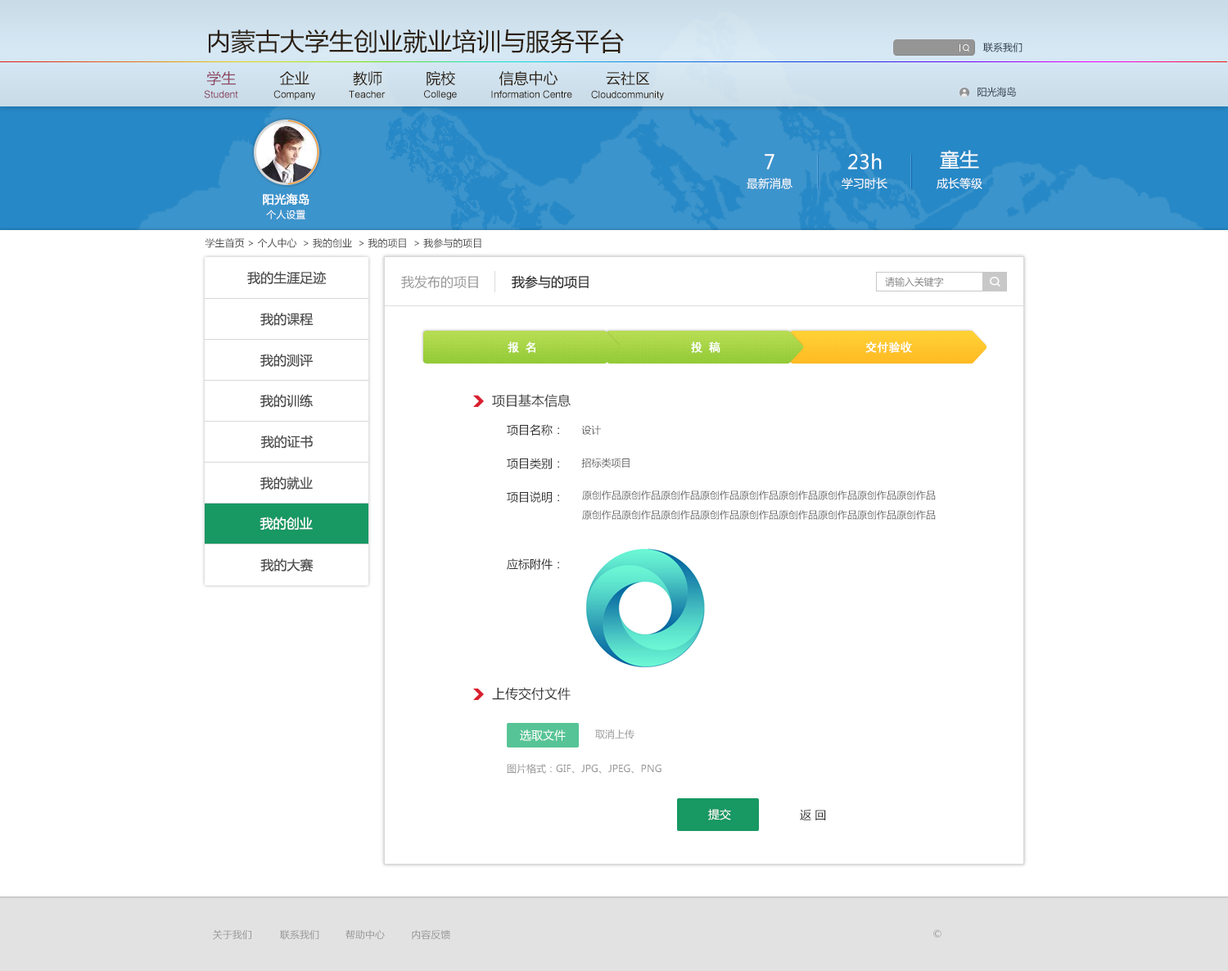
<style>
.page{position:relative;width:1228px;height:971px;background:#ffffff}
.page>*{position:absolute;margin:0}
.t1{font:24.6px "MicrosoftYaHei";color:#2b1f11}
.t2{font:9.8px "MicrosoftYaHei";color:#263744}
.t3{font:14.7px "MicrosoftYaHei";color:#2b1f11}
.t4{font:14.7px "MicrosoftYaHei";color:#8c4360}
.t5{font:9.8px "ArialMT";color:#8c4360}
.t6{font:9.8px "ArialMT";color:#2b1f11}
.t7{font:19.6px "MicrosoftYaHei";color:#ffffff}
.t8{font:11.5px "MicrosoftYaHei";color:#ffffff}
.t9{font:11.5px/19.6px "MicrosoftYaHei";color:#ffffff;font-weight:bold}
.t10{font:9.8px/14.7px "MicrosoftYaHei";color:#ffffff}
.t11{font:9.8px "MicrosoftYaHei";color:#4c4c4c}
.t12{font:13.1px "MicrosoftYaHei";color:#4c4c4c}
.t13{font:13.1px "MicrosoftYaHei";color:#999999}
.t14{font:13.1px "MicrosoftYaHei";color:#333333}
.t15{font:9.8px "MicrosoftYaHei";color:#828282}
.t16{font:11.5px "SimHei";color:#ffffff;font-weight:bold}
.t17{font:13.1px "MicrosoftYaHei";color:#323232}
.t18{font:11.5px/33.6px "MicrosoftYaHei";color:#323232}
.t19{font:9.8px "MicrosoftYaHei";color:#646464}
.t20{font:9.8px/19.6px "MicrosoftYaHei";color:#646464}
.t21{font:13.1px "MicrosoftYaHei";color:#ffffff}
.t22{font:9.8px "MicrosoftYaHei";color:#969696}
.t23{font:11.5px "MicrosoftYaHei";color:#323232}
.t24{font:9.6px "MicrosoftYaHei";color:#969696}
</style>
<div class="page">
<p class="t1" style="left:209px;top:29px;width:415px;height:25px">内蒙古大学生创业就业培训与服务平台</p>
<p class="t2" style="left:983px;top:43px;width:40px;height:9px">联系我们</p>
<p class="t3" style="left:206px;top:70px;width:443px;height:16px"><span class="t4">学生</span>          企业          教师          院校          信息中心           云社区</p>
<p class="t2" style="left:978px;top:87px;width:38px;height:10px">阳光海岛</p>
<p class="t5" style="left:204px;top:90px;width:34px;height:8px">Student</p>
<p class="t6" style="left:273px;top:90px;width:42px;height:10px">Company</p>
<p class="t6" style="left:349px;top:90px;width:37px;height:8px">Teacher</p>
<p class="t6" style="left:424px;top:90px;width:33px;height:10px">College</p>
<p class="t6" style="left:491px;top:90px;width:81px;height:8px">Information Centre</p>
<p class="t6" style="left:591px;top:90px;width:73px;height:11px">Cloudcommunity</p>
<p class="t7" style="left:940px;top:150px;width:39px;height:19px">童生</p>
<p class="t7" style="left:765px;top:154px;width:9px;height:15px">7</p>
<p class="t7" style="left:848px;top:153px;width:34px;height:16px">23h</p>
<p class="t8" style="left:747px;top:178px;width:46px;height:11px">最新消息</p>
<p class="t8" style="left:842px;top:178px;width:45px;height:11px">学习时长</p>
<p class="t8" style="left:937px;top:178px;width:45px;height:11px">成长等级</p>
<p class="t9" style="left:263px;top:193px;width:46px;height:26px;text-align:center">阳光海岛<br><span class="t10">个人设置</span></p>
<p class="t11" style="left:205px;top:238px;width:276px;height:10px">学生首页 &gt; 个人中心  &gt; 我的创业  &gt; 我的项目  &gt; 我参与的项目</p>
<p class="t12" style="left:247px;top:271px;width:80px;height:14px">我的生涯足迹</p>
<p class="t13" style="left:401px;top:275px;width:77px;height:14px">我发布的项目</p>
<p class="t14" style="left:512px;top:275px;width:77px;height:14px">我参与的项目</p>
<p class="t15" style="left:885px;top:277px;width:59px;height:10px">请输入关键字</p>
<p class="t12" style="left:260px;top:313px;width:54px;height:13px">我的课程</p>
<p class="t16" style="left:508px;top:341px;width:27px;height:12px">报 名</p>
<p class="t16" style="left:691px;top:341px;width:29px;height:12px">投 稿</p>
<p class="t16" style="left:865px;top:341px;width:47px;height:12px">交付验收</p>
<p class="t12" style="left:260px;top:354px;width:53px;height:13px">我的测评</p>
<p class="t12" style="left:260px;top:394px;width:53px;height:14px">我的训练</p>
<p class="t17" style="left:492px;top:394px;width:79px;height:14px">项目基本信息</p>
<p class="t18" style="left:507px;top:424px;width:52px;height:146px;text-align:right">项目名称：<br>项目类别：<br>项目说明：<br><br>应标附件：</p>
<p class="t19" style="left:581px;top:425px;width:20px;height:10px">设计</p>
<p class="t12" style="left:260px;top:435px;width:53px;height:14px">我的证书</p>
<p class="t19" style="left:581px;top:458px;width:49px;height:10px">招标类项目</p>
<p class="t12" style="left:260px;top:476px;width:53px;height:14px">我的就业</p>
<p class="t20" style="left:582px;top:490px;width:354px;height:30px">原创作品原创作品原创作品原创作品原创作品原创作品原创作品原创作品原创作品<br>原创作品原创作品原创作品原创作品原创作品原创作品原创作品原创作品原创作品</p>
<p class="t21" style="left:260px;top:517px;width:53px;height:14px">我的创业</p>
<p class="t12" style="left:260px;top:558px;width:54px;height:13px">我的大赛</p>
<p class="t17" style="left:492px;top:687px;width:79px;height:13px">上传交付文件</p>
<p class="t8" style="left:520px;top:729px;width:46px;height:12px">选取文件</p>
<p class="t22" style="left:595px;top:729px;width:39px;height:10px">取消上传</p>
<p class="t22" style="left:507px;top:764px;width:155px;height:10px">图片格式：GIF、JPG、JPEG、PNG</p>
<p class="t8" style="left:708px;top:809px;width:23px;height:11px">提交</p>
<p class="t23" style="left:800px;top:809px;width:26px;height:11px">返 回</p>
<p class="t24" style="left:933px;top:929px;width:9px;height:8px">©</p>
<p class="t24" style="left:213px;top:930px;width:38px;height:10px">关于我们</p>
<p class="t24" style="left:280px;top:930px;width:39px;height:10px">联系我们</p>
<p class="t24" style="left:345px;top:930px;width:40px;height:10px">帮助中心</p>
<p class="t24" style="left:412px;top:930px;width:38px;height:10px">内容反馈</p>
</div>
